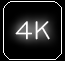
<style>
.page{position:relative;width:65px;height:61px;background:#000000}
.page>*{position:absolute;margin:0}
.t1{font:26.2px "Bryant-RegularAlt";color:#fffefe}
</style>
<div class="page">
<p class="t1" style="left:15px;top:21px;width:35px;height:19px">4K</p>
</div>
